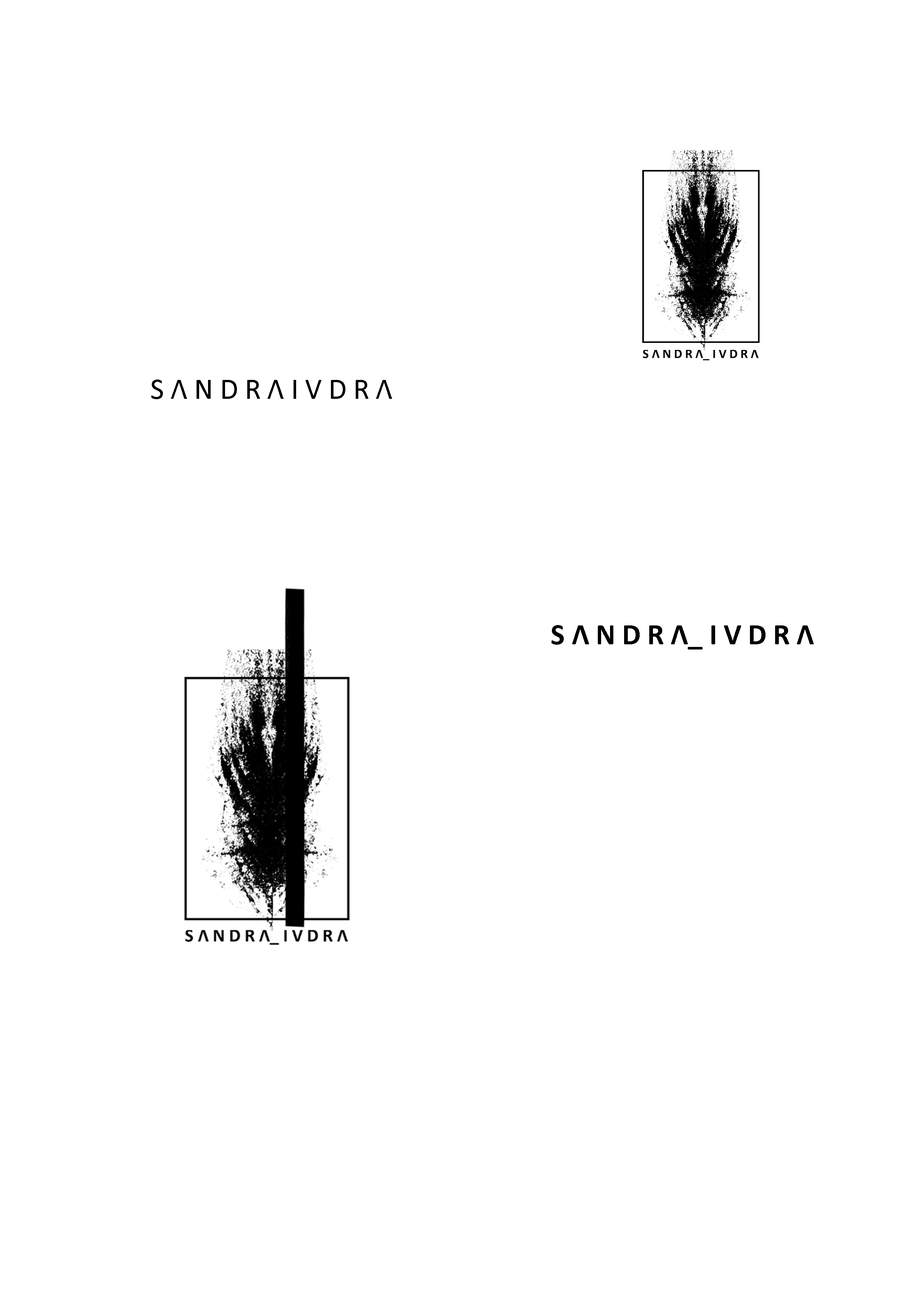
<style>
.page{position:relative;width:918px;height:1299px;background:#ffffff}
.page>*{position:absolute;margin:0}
.t1{font:29.5px "Calibri";color:#000000}
.t2{font:29.5px "Calibri-Bold";color:#000000}
</style>
<div class="page">
<p class="t1" style="left:151px;top:379px;width:241px;height:20px">S Λ N D R Λ I V D R Λ</p>
<p class="t2" style="left:552px;top:625px;width:262px;height:24px">S Λ N D R Λ_ I V D R Λ</p>
</div>
